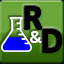
<style>
.page{position:relative;width:64px;height:64px}
.page>*{position:absolute;margin:0}
.t1{font:36px "Calibri-Bold";color:#000000}
.t2{font:18px "Calibri-Bold";color:#ffffff}
</style>
<div class="page">
<p class="t1" style="left:24px;top:6px;width:18px;height:23px">R</p>
<p class="t1" style="left:42px;top:29px;width:20px;height:23px">D</p>
<p class="t2" style="left:30px;top:31px;width:12px;height:12px">&amp;</p>
</div>
